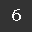
<style>
.page{position:relative;width:32px;height:32px;background:#333333}
.page>*{position:absolute;margin:0}
.t1{font:17.8px "MyriadPro-Regular";color:#ffffff;scale:1.12 1}
</style>
<div class="page">
<p class="t1" style="left:12px;top:9px;width:9px;height:12px">6</p>
</div>
